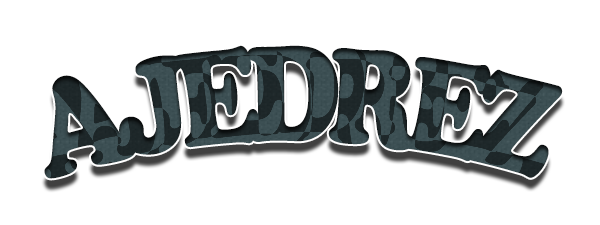
<style>
.page{position:relative;width:600px;height:225px;background:#ffffff}
.page>*{position:absolute;margin:0}
.t1{font:139.7px "CooperBlack";letter-spacing:-0.1em;color:#000000;scale:0.75 1}
</style>
<div class="page">
<p class="t1" style="left:44px;top:45px;width:519px;height:134px">AJEDREZ</p>
</div>
